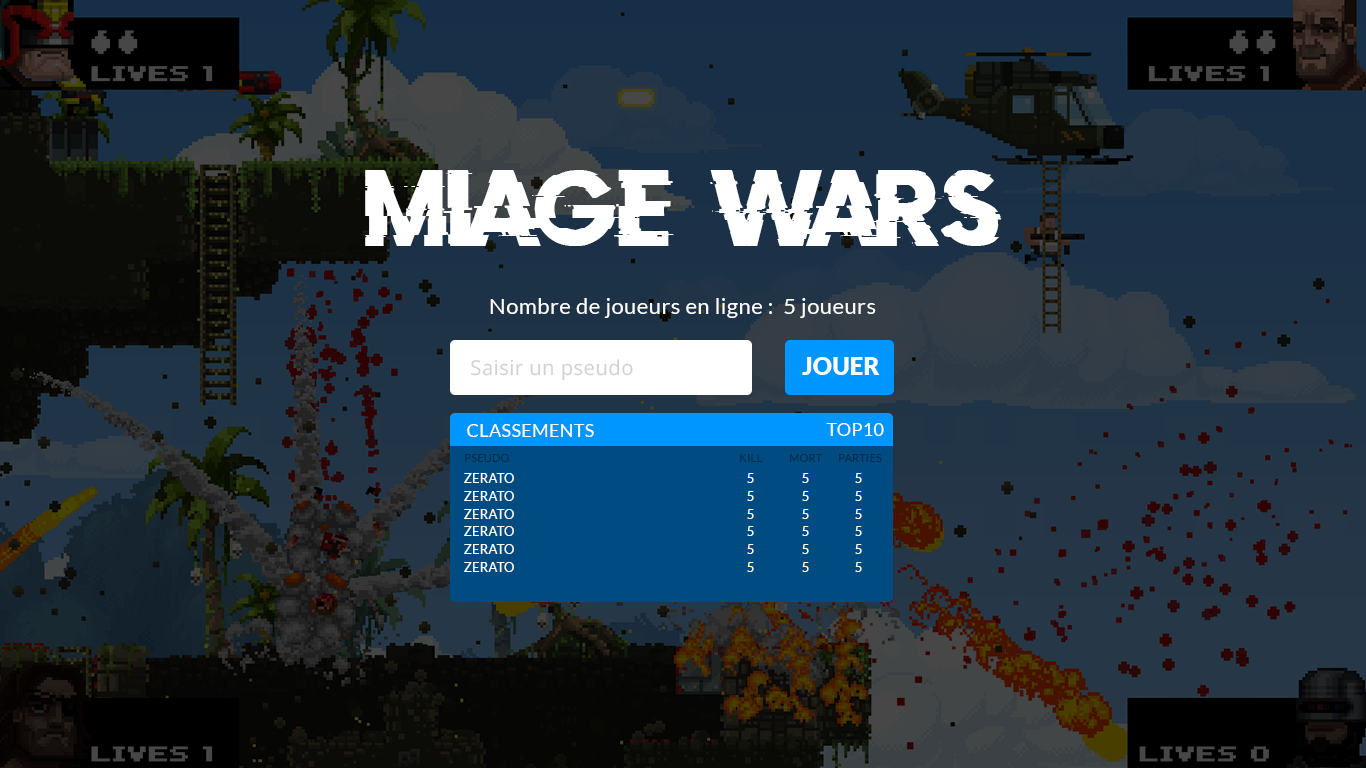
<style>
.page{position:relative;width:1366px;height:768px}
.page>*{position:absolute;margin:0}
.t1{font:85.1px "DoctorGlitch";letter-spacing:0.02em;color:#ffffff}
.t2{font:22px "Lato-Regular";letter-spacing:0.02em;color:#ffffff}
.t3{font:20.4px "OpenSans-Regular";letter-spacing:0.02em;color:#d1d1d1}
.t4{font:23.8px "Lato-Black";letter-spacing:0.02em;color:#ffffff}
.t5{font:18px "Lato-Regular";letter-spacing:0.02em;color:#ffffff;text-transform:uppercase}
.t6{font:11px "Lato-Regular";letter-spacing:0.02em;color:#012c4b;text-transform:uppercase}
.t7{font:13px "Lato-Regular";letter-spacing:0.02em;color:#ffffff;text-transform:uppercase}
</style>
<div class="page">
<p class="t1" style="left:365px;top:170px;width:309px;height:76px">MIAGE</p>
<p class="t1" style="left:710px;top:169px;width:292px;height:77px">wars</p>
<p class="t2" style="left:490px;top:298px;width:386px;height:20px">Nombre de joueurs en ligne :  5 joueurs</p>
<p class="t3" style="left:471px;top:359px;width:162px;height:22px">Saisir un pseudo</p>
<p class="t4" style="left:802px;top:357px;width:78px;height:18px">JOUER</p>
<p class="t5" style="left:467px;top:424px;width:127px;height:13px">Classements</p>
<p class="t5" style="left:826px;top:423px;width:58px;height:13px">TOP10</p>
<p class="t6" style="left:465px;top:454px;width:44px;height:8px">PSEUDO</p>
<p class="t6" style="left:740px;top:454px;width:23px;height:8px">KILL</p>
<p class="t6" style="left:790px;top:454px;width:32px;height:8px">MoRT</p>
<p class="t6" style="left:839px;top:454px;width:43px;height:8px">PARTIES</p>
<p class="t7" style="left:464px;top:473px;width:50px;height:10px">ZERATO</p>
<p class="t7" style="left:747px;top:473px;width:7px;height:10px">5</p>
<p class="t7" style="left:802px;top:473px;width:7px;height:10px">5</p>
<p class="t7" style="left:855px;top:473px;width:7px;height:10px">5</p>
<p class="t7" style="left:464px;top:491px;width:50px;height:10px">ZERATO</p>
<p class="t7" style="left:747px;top:491px;width:7px;height:10px">5</p>
<p class="t7" style="left:802px;top:491px;width:7px;height:10px">5</p>
<p class="t7" style="left:855px;top:491px;width:7px;height:10px">5</p>
<p class="t7" style="left:464px;top:509px;width:50px;height:10px">ZERATO</p>
<p class="t7" style="left:747px;top:509px;width:7px;height:10px">5</p>
<p class="t7" style="left:802px;top:509px;width:7px;height:10px">5</p>
<p class="t7" style="left:855px;top:509px;width:7px;height:10px">5</p>
<p class="t7" style="left:464px;top:526px;width:50px;height:10px">ZERATO</p>
<p class="t7" style="left:747px;top:526px;width:7px;height:10px">5</p>
<p class="t7" style="left:802px;top:526px;width:7px;height:10px">5</p>
<p class="t7" style="left:855px;top:526px;width:7px;height:10px">5</p>
<p class="t7" style="left:464px;top:544px;width:50px;height:10px">ZERATO</p>
<p class="t7" style="left:747px;top:544px;width:7px;height:10px">5</p>
<p class="t7" style="left:802px;top:544px;width:7px;height:10px">5</p>
<p class="t7" style="left:855px;top:544px;width:7px;height:10px">5</p>
<p class="t7" style="left:464px;top:562px;width:50px;height:10px">ZERATO</p>
<p class="t7" style="left:747px;top:562px;width:7px;height:10px">5</p>
<p class="t7" style="left:802px;top:562px;width:7px;height:10px">5</p>
<p class="t7" style="left:855px;top:562px;width:7px;height:10px">5</p>
</div>
